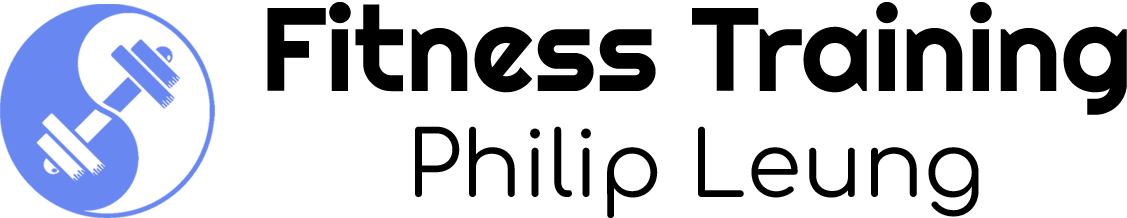
<style>
.page{position:relative;width:1127px;height:218px;background:#ffffff}
.page>*{position:absolute;margin:0}
.t1{font:118px "Righteous-Regular";color:#000000}
.t2{font:90px "Comfortaa-Regular";color:#000000}
</style>
<div class="page">
<p class="t1" style="left:267px;top:2px;width:860px;height:113px">Fitness Training</p>
<p class="t2" style="left:415px;top:126px;width:564px;height:92px">Philip Leung</p>
</div>
